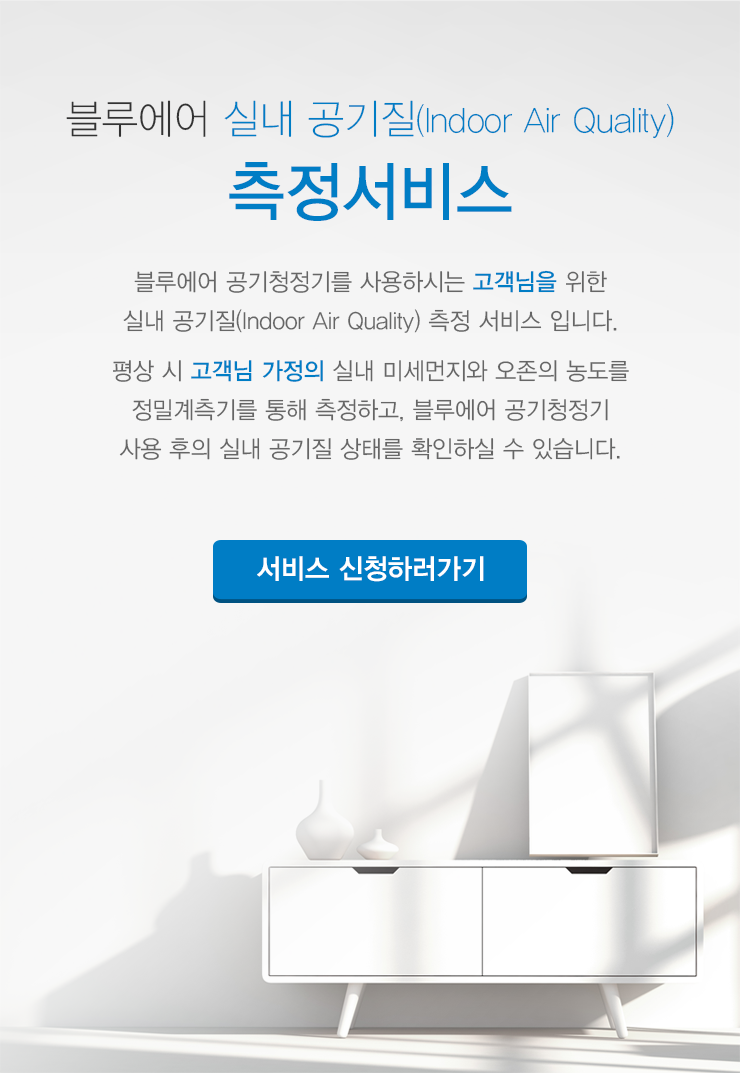
<style>
.page{position:relative;width:740px;height:1073px;background:#f6f6f6}
.page>*{position:absolute;margin:0}
.t1{font:35px "YDVYGO31";color:#007dc5;scale:0.95 1}
.t2{font:41px "YDVYGO31";color:#333333;scale:0.95 1}
.t3{font:41px "YDVYGO31";color:#007dc5;scale:0.95 1}
.t4{font:65px/80px "YDVYGO33";color:#007dc5;scale:0.95 1}
.t5{font:24px/39px "YDVYGO32";color:#666666;scale:0.95 1}
.t6{font:24px/39px "YDVYGO33";color:#007dc5;scale:0.95 1}
.t7{font:24px/25px "YDVYGO32";color:#666666;scale:0.95 1}
.t8{font:24px/25px "YDVYGO33";color:#007dc5;scale:0.95 1}
.t9{font:28px "YDVYGO34";color:#ffffff;scale:0.95 1}
</style>
<div class="page">
<p class="t1" style="left:66px;top:100px;width:608px;height:121px;text-align:center"><span class="t2">블루에어 </span><span class="t3">실내 공기질</span>(Indoor Air Quality)<br><span class="t4">측정서비스</span></p>
<p class="t5" style="left:113px;top:270px;width:516px;height:190px;text-align:center">블루에어 공기청정기를 사용하시는 <span class="t6">고객님을</span> 위한<br>실내 공기질(Indoor Air Quality) 측정 서비스 입니다.<span class="t7"><br><br>평상 시 </span><span class="t8">고객님 가정의</span><span class="t7"> 실내 미세먼지와 오존의 농도를<br></span>정밀계측기를 통해 측정하고, 블루에어 공기청정기<br>사용 후의 실내 공기질 상태를 확인하실 수 있습니다.</p>
<p class="t9" style="left:257px;top:556px;width:227px;height:26px">서비스 신청하러가기</p>
</div>
